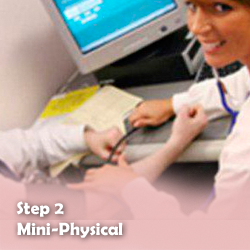
<style>
.page{position:relative;width:250px;height:250px}
.page>*{position:absolute;margin:0}
.t1{font:17.7px "BerlinSansFBDemi-Bold";color:#ffffff}
</style>
<div class="page">
<p class="t1" style="left:16px;top:201px;width:107px;height:37px">Step 2<br>Mini-Physical</p>
</div>
